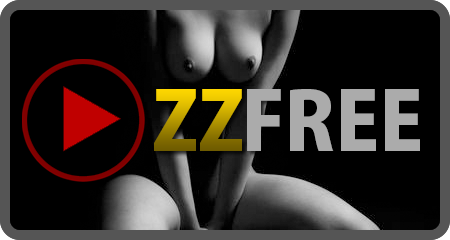
<style>
.page{position:relative;width:450px;height:240px;background:#000000}
.page>*{position:absolute;margin:0}
.t1{font:80px "KozGoPro-Heavy"}
.t2{font:80px "KozGoPro-Heavy";color:#ababab}
</style>
<div class="page">
<p class="t1" style="left:154px;top:89px;width:88px;height:62px">ZZ</p>
<p class="t2" style="left:247px;top:89px;width:173px;height:62px">FREE</p>
</div>
